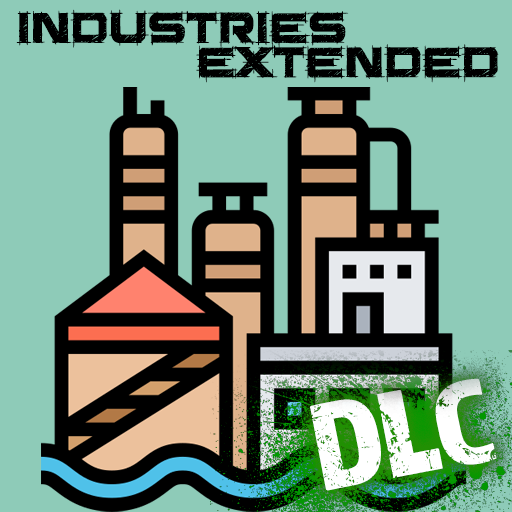
<style>
.page{position:relative;width:512px;height:512px;background:#8ecbb8}
.page>*{position:absolute;margin:0}
.t1{font:50px "SaucerBB";color:#000000}
</style>
<div class="page">
<p class="t1" style="left:16px;top:9px;width:333px;height:39px">industries</p>
<p class="t1" style="left:196px;top:42px;width:303px;height:41px">extended</p>
</div>
